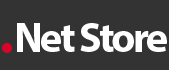
<style>
.page{position:relative;width:169px;height:70px;background:#333333}
.page>*{position:absolute;margin:0}
.t1{font:42px "MyriadPro-Bold";letter-spacing:-0.06em;color:#ffffff}
</style>
<div class="page">
<p class="t1" style="left:17px;top:23px;width:150px;height:29px">Net Store</p>
</div>
